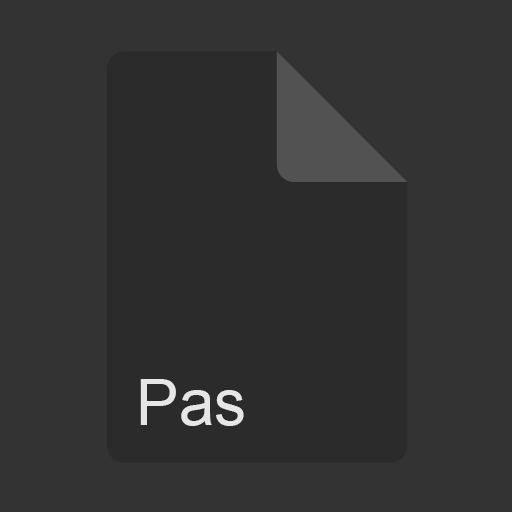
<style>
.page{position:relative;width:512px;height:512px;background:#333333}
.page>*{position:absolute;margin:0}
.t1{font:64px "ArialMT";color:#e6e6e6}
</style>
<div class="page">
<p class="t1" style="left:140px;top:379px;width:104px;height:47px">Pas</p>
</div>
